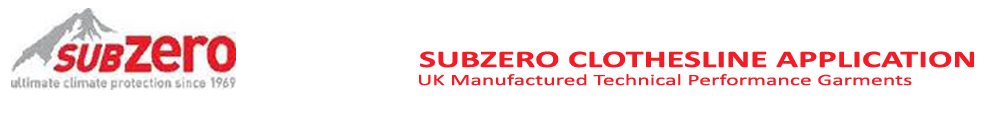
<style>
.page{position:relative;width:992px;height:113px;background:#ffffff}
.page>*{position:absolute;margin:0}
.t1{font:24px "Calibri-Bold";color:#f41b24;scale:1.51 1}
.t2{font:21.4px "Calibri-Bold";color:#f41b24;scale:1.51 1}
.t3{font:16px "Calibri";color:#f41b24;scale:1.49 1}
.t4{font:19.8px "Calibri-Bold";color:#f41b24;scale:1.49 1}
</style>
<div class="page">
<p class="t1" style="left:420px;top:51px;width:554px;height:17px"><span class="t2"><br>                         </span>  SUBZERO CLOTHESLINE APPLICATION</p>
<p class="t3" style="left:419px;top:74px;width:493px;height:12px"><span class="t4"><br>                           </span>UK Manufactured Technical Performance Garments</p>
</div>
